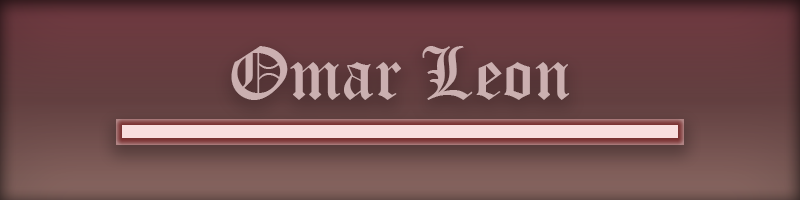
<style>
.page{position:relative;width:800px;height:200px}
.page>*{position:absolute;margin:0}
.t1{font:72px "OldEnglishTextMT";color:#cbafb0}
</style>
<div class="page">
<p class="t1" style="left:231px;top:46px;width:339px;height:54px">Omar Leon</p>
</div>
